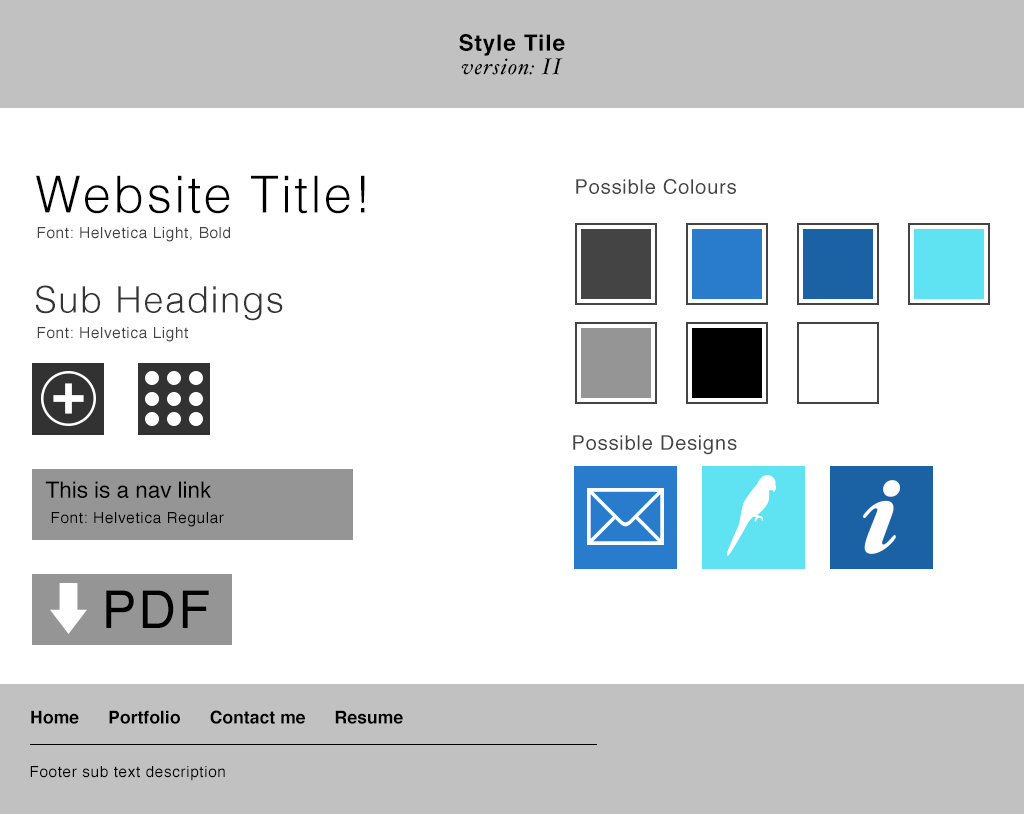
<style>
.page{position:relative;width:1024px;height:814px;background:#ffffff}
.page>*{position:absolute;margin:0}
.t1{font:22.5px/23.2px "HoeflerText-Italic";letter-spacing:0.04em;color:#000000}
.t2{font:22.5px/23.2px "Helvetica-Bold";letter-spacing:0.04em;color:#000000}
.t3{font:51.1px "Helvetica-Light";letter-spacing:0.04em;color:#000000}
.t4{font:20px "Helvetica";letter-spacing:0.04em;color:#444444}
.t5{font:15.3px "Helvetica";letter-spacing:0.04em;color:#444444}
.t6{font:36.6px "Helvetica-Light";letter-spacing:0.04em;color:#353535}
.t7{font:22.4px "Helvetica";color:#000000}
.t8{font:15.3px "Helvetica";letter-spacing:0.04em;color:#000000}
.t9{font:52.1px "Helvetica";letter-spacing:0.04em;color:#000000}
.t10{font:17.6px "Helvetica-Bold";color:#000000}
</style>
<div class="page">
<p class="t1" style="left:459px;top:34px;width:106px;height:41px;text-align:center"><span class="t2">Style Tile<br></span>version: II</p>
<p class="t3" style="left:36px;top:175px;width:329px;height:39px">Website Title!</p>
<p class="t4" style="left:576px;top:179px;width:160px;height:15px">Possible Colours</p>
<p class="t5" style="left:37px;top:227px;width:193px;height:15px">Font: Helvetica Light, Bold</p>
<p class="t6" style="left:35px;top:285px;width:248px;height:36px">Sub Headings</p>
<p class="t5" style="left:37px;top:327px;width:151px;height:15px">Font: Helvetica Light</p>
<p class="t4" style="left:573px;top:435px;width:164px;height:20px">Possible Designs</p>
<p class="t7" style="left:45px;top:481px;width:166px;height:17px">This is a nav link</p>
<p class="t8" style="left:51px;top:512px;width:173px;height:15px">Font: Helvetica Regular</p>
<p class="t9" style="left:106px;top:590px;width:103px;height:38px">PDF</p>
<p class="t10" style="left:31px;top:710px;width:372px;height:14px">Home      Portfolio      Contact me      Resume</p>
<p class="t8" style="left:30px;top:766px;width:195px;height:15px">Footer sub text description</p>
</div>
